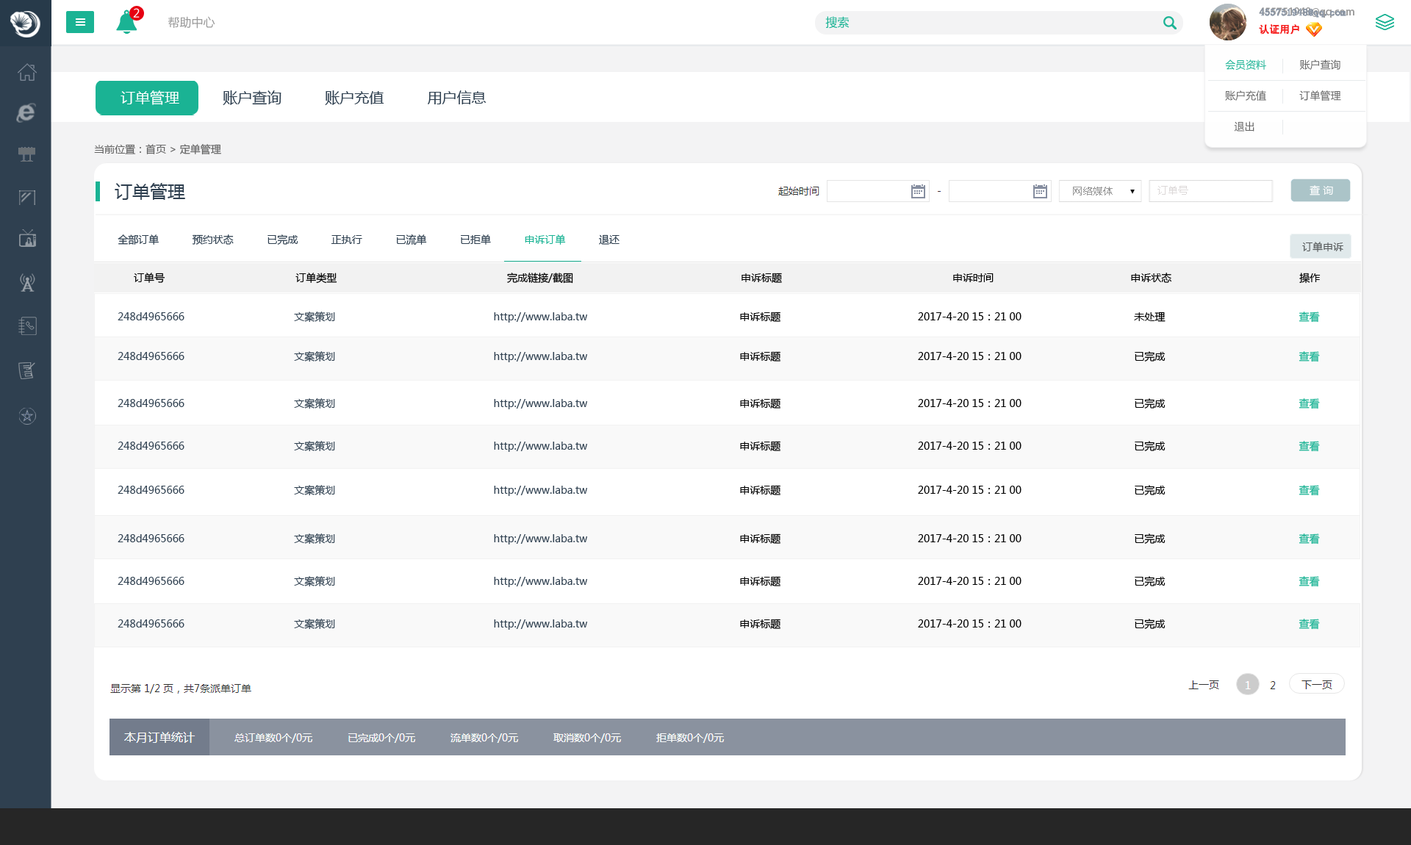
<style>
.page{position:relative;width:1411px;height:845px;background:#ffffff}
.page>*{position:absolute;margin:0}
.t1{font:11.8px "MicrosoftYaHei";color:#ffffff}
.t2{font:11.8px "MicrosoftYaHei";color:#999999}
.t3{font:11.8px "MicrosoftYaHei";color:#1ab394}
.t4{font:10.3px/17.6px "AdobeHeitiStd-Regular";color:#999999}
.t5{font:10.3px/17.6px "AdobeHeitiStd-Regular";color:#f61e1e}
.t6{font:10.3px/17.6px "AdobeHeitiStd-Regular";color:#ffffff}
.t7{font:10.3px/17.6px "SimSun";color:#8894a4;font-weight:bold}
.t8{font:10.3px/17.6px "SimSun";color:#f61e1e}
.t9{font:10.3px/30.9px "MicrosoftYaHei";color:#666666}
.t10{font:10.3px/30.9px "MicrosoftYaHei";color:#1ab394}
.t11{font:14.7px "MicrosoftYaHei";color:#2f4050}
.t12{font:14.7px "MicrosoftYaHei";color:#ffffff}
.t13{font:10.3px "MicrosoftYaHei";color:#666666}
.t14{font:17.6px "MicrosoftYaHei";color:#2f4050}
.t15{font:10.3px "MicrosoftYaHei";color:#dcd8d8}
.t16{font:10.3px "MicrosoftYaHei";color:#ffffff}
.t17{font:10.3px "MicrosoftYaHei";color:#999999}
.t18{font:10.3px "MicrosoftYaHei";color:#2f4050}
.t19{font:10.3px "MicrosoftYaHei";color:#1ab394}
.t20{font:10.3px "MicrosoftYaHei";color:#575a5b}
.t21{font:10.3px "MicrosoftYaHei";color:#000000}
</style>
<div class="page">
<p class="t1" style="left:133px;top:8px;width:7px;height:10px">2</p>
<p class="t2" style="left:168px;top:16px;width:47px;height:13px">帮助中心</p>
<p class="t3" style="left:825px;top:16px;width:25px;height:13px">搜索</p>
<p class="t4" style="left:1259px;top:7px;width:95px;height:28px">455751948@qq.com<br><span class="t5">认证用户               </span><span class="t6">退出</span></p>
<p class="t7" style="left:1259px;top:8px;width:87px;height:27px">455751948@qq.com<br><span class="t8">认证用户</span></p>
<p class="t9" style="left:1225px;top:60px;width:116px;height:72px"><span class="t10">会员资料</span>           账户查询<br>账户充值           订单管理           <br>   退出</p>
<p class="t11" style="left:121px;top:90px;width:365px;height:15px"><span class="t12">订单管理          </span>账户查询          账户充值          用户信息</p>
<p class="t13" style="left:94px;top:144px;width:127px;height:11px">当前位置：首页 &gt; 定单管理</p>
<p class="t14" style="left:115px;top:183px;width:70px;height:17px">订单管理</p>
<p class="t15" style="left:1157px;top:186px;width:31px;height:9px">订单号</p>
<p class="t16" style="left:1310px;top:185px;width:23px;height:10px">查 询</p>
<p class="t17" style="left:1073px;top:187px;width:40px;height:8px">网络媒体</p>
<p class="t18" style="left:118px;top:234px;width:502px;height:11px">全部订单           预约状态           已完成           正执行           已流单           已拒单           <span class="t19">申诉订单</span>           退还</p>
<p class="t20" style="left:1302px;top:242px;width:41px;height:10px">订单申诉</p>
<p class="t21" style="left:134px;top:273px;width:1187px;height:11px">订单号                                           订单类型                                                        完成链接/截图                                                       申诉标题                                                        申诉时间                                             申诉状态                                          操作</p>
<p class="t18" style="left:118px;top:312px;width:1202px;height:11px">248d4965666                                    文案策划                                                    http://www.laba.tw       <span class="t21">                                           申诉标题                                             2017-4-20 15：21 00                                     未处理                                            </span><span class="t19">查看</span></p>
<p class="t18" style="left:118px;top:351px;width:1202px;height:11px">248d4965666                                    文案策划                                                    http://www.laba.tw       <span class="t21">                                           申诉标题                                             2017-4-20 15：21 00                                     已完成                                            </span><span class="t19">查看</span></p>
<p class="t18" style="left:118px;top:398px;width:1202px;height:11px">248d4965666                                    文案策划                                                    http://www.laba.tw       <span class="t21">                                           申诉标题                                             2017-4-20 15：21 00                                     已完成                                            </span><span class="t19">查看</span></p>
<p class="t18" style="left:118px;top:441px;width:1202px;height:11px">248d4965666                                    文案策划                                                    http://www.laba.tw       <span class="t21">                                           申诉标题                                             2017-4-20 15：21 00                                     已完成                                            </span><span class="t19">查看</span></p>
<p class="t18" style="left:118px;top:485px;width:1202px;height:11px">248d4965666                                    文案策划                                                    http://www.laba.tw       <span class="t21">                                           申诉标题                                             2017-4-20 15：21 00                                     已完成                                            </span><span class="t19">查看</span></p>
<p class="t18" style="left:118px;top:534px;width:1202px;height:11px">248d4965666                                    文案策划                                                    http://www.laba.tw       <span class="t21">                                           申诉标题                                             2017-4-20 15：21 00                                     已完成                                            </span><span class="t19">查看</span></p>
<p class="t18" style="left:118px;top:576px;width:1202px;height:11px">248d4965666                                    文案策划                                                    http://www.laba.tw       <span class="t21">                                           申诉标题                                             2017-4-20 15：21 00                                     已完成                                            </span><span class="t19">查看</span></p>
<p class="t18" style="left:118px;top:619px;width:1202px;height:11px">248d4965666                                    文案策划                                                    http://www.laba.tw       <span class="t21">                                           申诉标题                                             2017-4-20 15：21 00                                     已完成                                            </span><span class="t19">查看</span></p>
</div>
